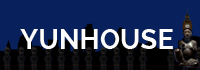
<style>
.page{position:relative;width:200px;height:70px;background:#08205b}
.page>*{position:absolute;margin:0}
.t1{font:26.9px "Raleway-Bold";letter-spacing:0.01em;color:#fdfdfe;text-transform:uppercase}
</style>
<div class="page">
<p class="t1" style="left:20px;top:29px;width:153px;height:20px">yunhouse</p>
</div>
